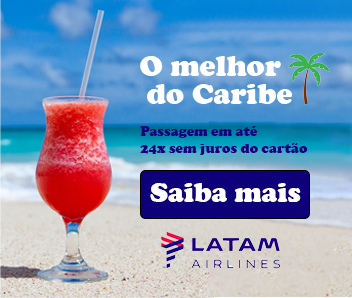
<style>
.page{position:relative;width:352px;height:298px}
.page>*{position:absolute;margin:0}
.t1{font:30px "CooperBlack";color:#ffffff}
.t2{font:14px "CooperBlack";color:#18007e}
.t3{font:28.1px "CooperBlack";color:#fefefe}
</style>
<div class="page">
<p class="t1" style="left:140px;top:56px;width:141px;height:20px">O melhor</p>
<p class="t1" style="left:147px;top:84px;width:145px;height:20px">do Caribe</p>
<p class="t2" style="left:140px;top:126px;width:168px;height:29px">Passagem em até<br>24x sem juros do cartão</p>
<p class="t3" style="left:150px;top:183px;width:151px;height:19px">Saiba mais</p>
</div>
